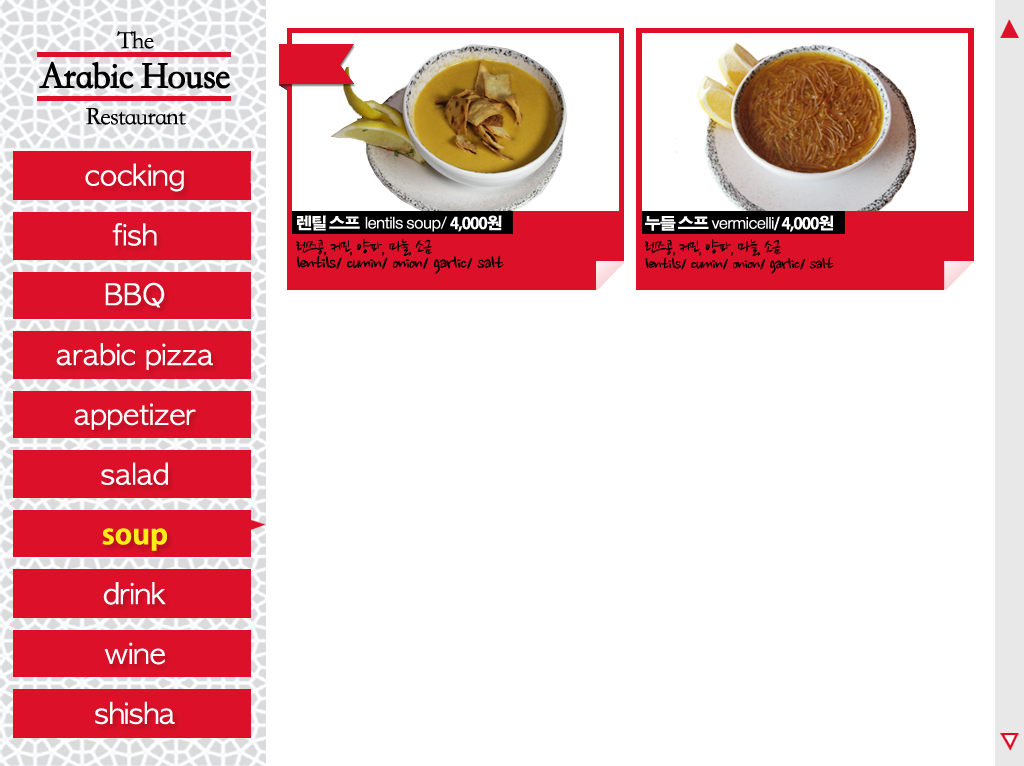
<style>
.page{position:relative;width:1024px;height:766px;background:#ffffff}
.page>*{position:absolute;margin:0}
.t1{font:37.9px/40px "STKaiti-SC-Regular";letter-spacing:-0.05em;color:#000000;font-weight:bold;scale:0.95 1}
.t2{font:25.2px/45.4px "STKaiti-SC-Regular";letter-spacing:-0.05em;color:#000000}
.t3{font:25.2px/36px "STKaiti-SC-Regular";letter-spacing:-0.05em;color:#000000}
.t4{font:28px/59.8px "AppleGothic";color:#ffffff;scale:1.05 1}
.t5{font:28px/59.8px "AdobeGothicStd-Bold";color:#fdef15;scale:1.05 1}
.t6{font:22px/18px "NanumBrush";letter-spacing:-0.05em;color:#000000}
.t7{font:16px/24px "AdobeGothicStd-Bold";letter-spacing:-0.05em;color:#ffffff}
.t8{font:16px/24px "AppleSDGothicNeo-Regular";letter-spacing:-0.05em;color:#ffffff}
.t9{font:18px/24px "NanumBrush";letter-spacing:-0.05em;color:#000000}
.t10{font:20px/18px "NanumBrush";letter-spacing:-0.05em;color:#000000}
.t11{font:16px/18.8px "AdobeGothicStd-Bold";letter-spacing:-0.05em;color:#ffffff}
.t12{font:16px/18.8px "AppleSDGothicNeo-Regular";letter-spacing:-0.05em;color:#ffffff}
</style>
<div class="page">
<p class="t1" style="left:39px;top:31px;width:191px;height:94px;text-align:center"><span class="t2">The<br></span>Arabic House<br><span class="t3">Restaurant</span></p>
<p class="t4" style="left:56px;top:163px;width:157px;height:562px;text-align:center">cocking<br>fish<br>BBQ<br>arabic pizza<br>appetizer<br>salad<br><span class="t5">soup<br></span>drink<br>wine<br>shisha</p>
<p class="t6" style="left:296px;top:215px;width:208px;height:59px"><span class="t7">렌틸 스프  </span><span class="t8">lentils soup/ </span><span class="t7">4,000원<br></span><span class="t9">렌즈콩, 커민, 양파, 마늘, 소금 <br></span>lentils/ cumin/ onion/ garlic/ salt</p>
<p class="t10" style="left:644px;top:215px;width:190px;height:59px"><span class="t11">누들 스프</span><span class="t12"> vermicelli</span><span class="t11">/ 4,000원<br></span><span class="t9">렌즈콩, 커민, 양파, 마늘, 소금<br></span>lentils/ cumin/ onion/ garlic/ salt</p>
</div>
